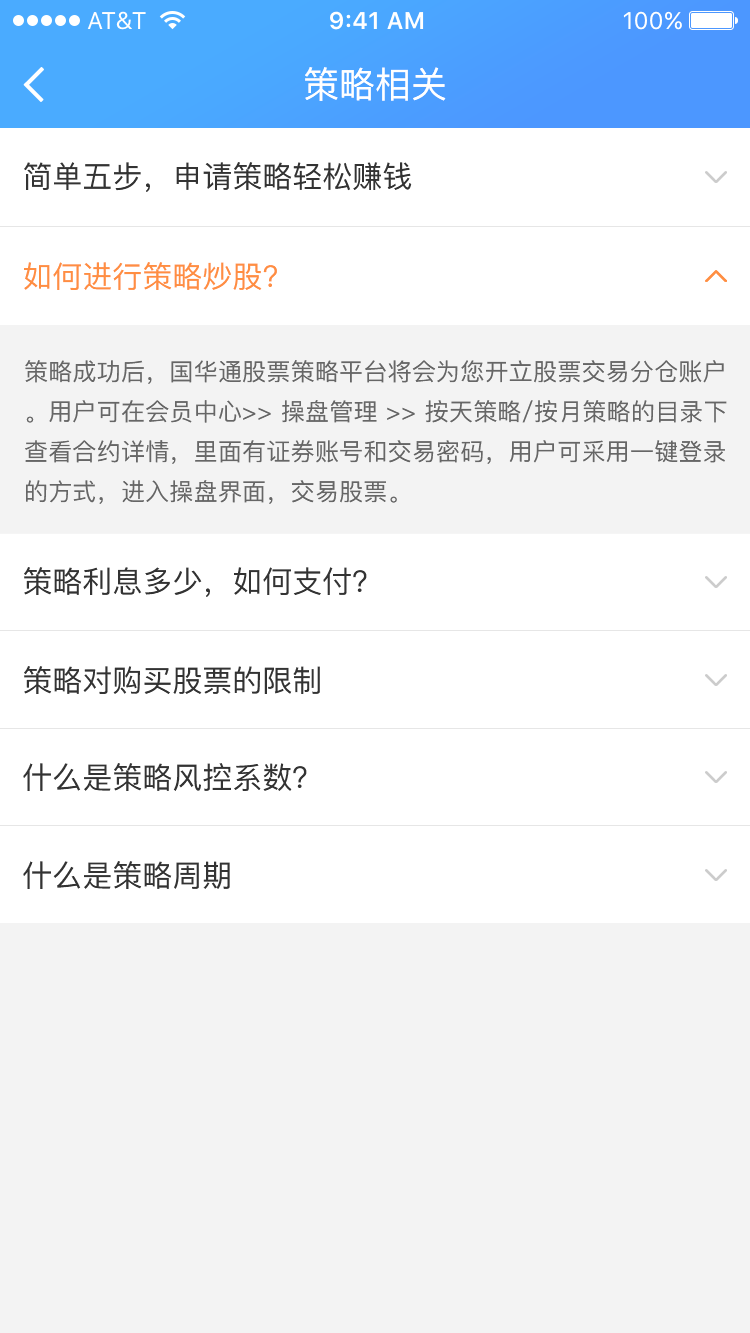
<style>
.page{position:relative;width:750px;height:1333px;background:#f3f3f3}
.page>*{position:absolute;margin:0}
.t1{font:36px "PingFang-SC-Medium";color:#ffffff}
.t2{font:30px "PingFang-SC-Medium";color:#333333}
.t3{font:30px "PingFang-SC-Medium";color:#ff8e42}
.t4{font:24px/40px "PingFang-SC-Medium";letter-spacing:0.01em;color:#666666}
</style>
<div class="page">
<p class="t1" style="left:305px;top:67px;width:141px;height:34px">策略相关</p>
<p class="t2" style="left:24px;top:162px;width:388px;height:30px">简单五步，申请策略轻松赚钱</p>
<p class="t3" style="left:24px;top:262px;width:253px;height:28px">如何进行策略炒股?</p>
<p class="t4" style="left:25px;top:360px;width:702px;height:144px">策略成功后，国华通股票策略平台将会为您开立股票交易分仓账户。用户可在会员中心&gt;&gt; 操盘管理 &gt;&gt; 按天策略/按月策略的目录下查看合约详情，里面有证券账号和交易密码，用户可采用一键登录的方式，进入操盘界面，交易股票。</p>
<p class="t2" style="left:24px;top:567px;width:343px;height:30px">策略利息多少，如何支付？</p>
<p class="t2" style="left:24px;top:666px;width:296px;height:28px">策略对购买股票的限制</p>
<p class="t2" style="left:23px;top:763px;width:284px;height:28px">什么是策略风控系数？</p>
<p class="t2" style="left:23px;top:861px;width:207px;height:28px">什么是策略周期</p>
</div>
